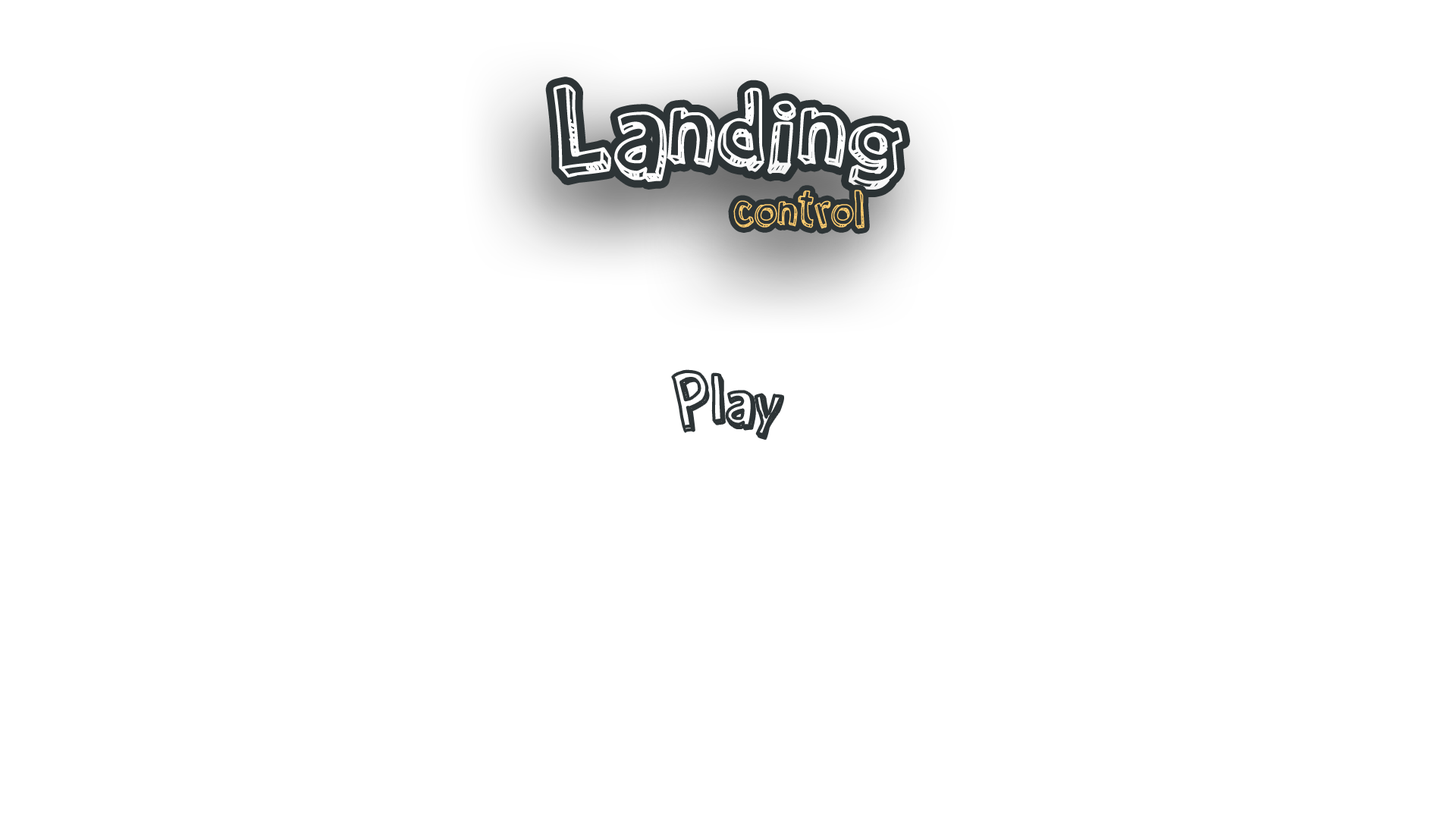
<style>
.page{position:relative;width:1456px;height:819px;background:#ffffff}
.page>*{position:absolute;margin:0}
.t1{font:120.1px "CartoonRelief";color:#fefefe}
.t2{font:50.6px "CartoonRelief";color:#fdcb6e}
.t3{font:66.4px "CartoonRelief";color:#2d3436}
</style>
<div class="page">
<p class="t1" style="left:553px;top:84px;width:350px;height:106px">Landing</p>
<p class="t2" style="left:733px;top:190px;width:131px;height:39px">control</p>
<p class="t3" style="left:672px;top:370px;width:111px;height:69px">Play</p>
</div>
